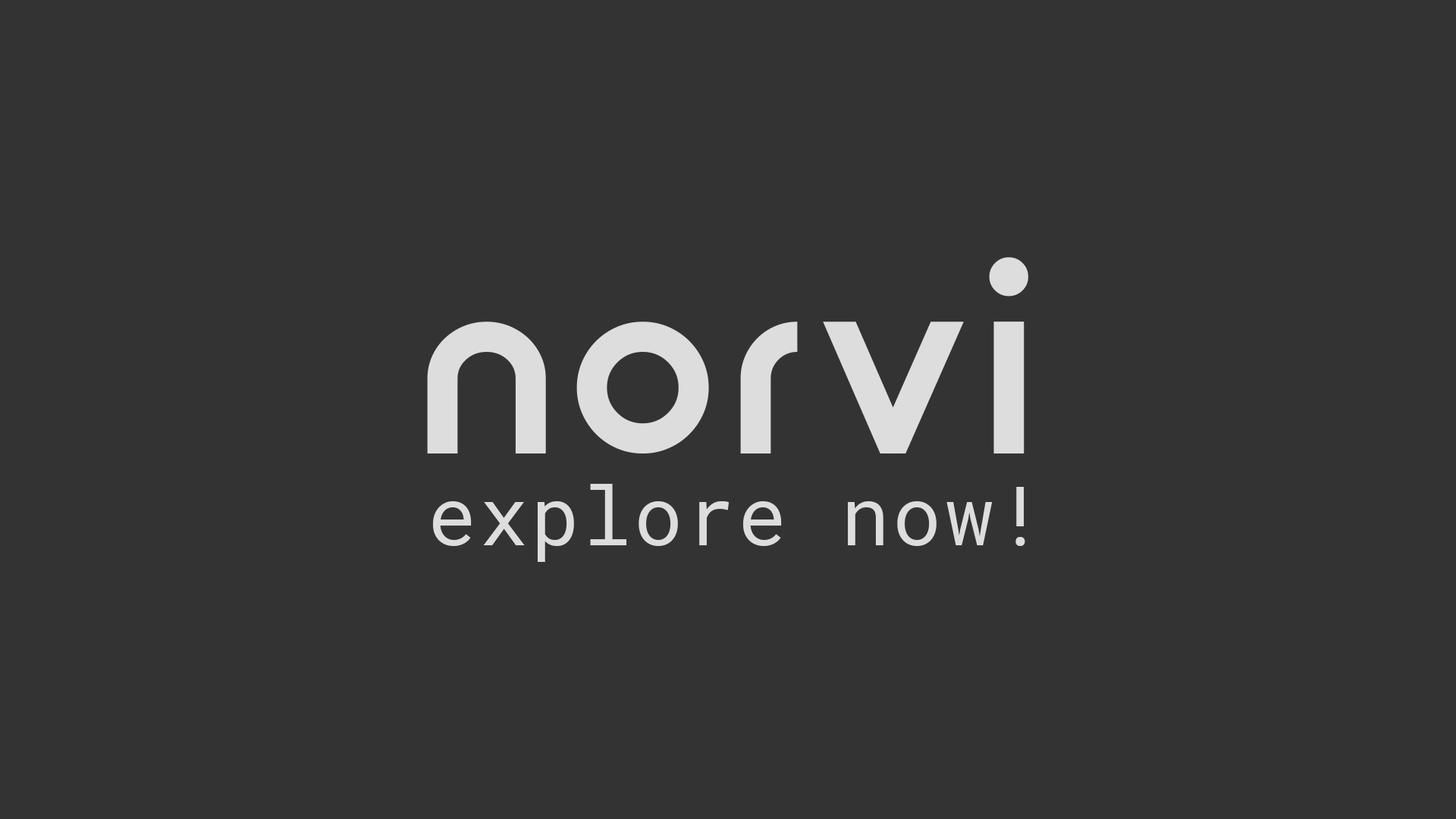
<style>
.page{position:relative;width:1456px;height:819px;background:#333333}
.page>*{position:absolute;margin:0}
.t1{font:227.7px "ZilapMinimalist";letter-spacing:0.04em;color:#dddddd}
.t2{font:80.8px "RobotoMonoForPowerline-Regular";letter-spacing:0.04em;color:#dddddd}
</style>
<div class="page">
<p class="t1" style="left:427px;top:257px;width:601px;height:196px">norvi</p>
<p class="t2" style="left:433px;top:484px;width:592px;height:78px">explore now!</p>
</div>
